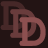
<style>
.page{position:relative;width:48px;height:48px;background:#231414}
.page>*{position:absolute;margin:0}
.t1{font:48px "CourierNewPS-BoldMT";color:#693c3c}
.t2{font:48px "CourierNewPS-BoldMT";color:#8c5050}
</style>
<div class="page">
<p class="t1" style="left:10px;top:9px;width:27px;height:29px">D</p>
<p class="t2" style="left:19px;top:17px;width:27px;height:29px">D</p>
</div>
